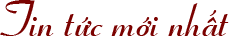
<style>
.page{position:relative;width:229px;height:36px;background:#ffffff}
.page>*{position:absolute;margin:0}
.t1{font:50px "UVNKieuBold";color:#7b0200}
</style>
<div class="page">
<p class="t1" style="left:0px;top:0px;width:229px;height:36px">Tin tức mới nhất</p>
</div>
